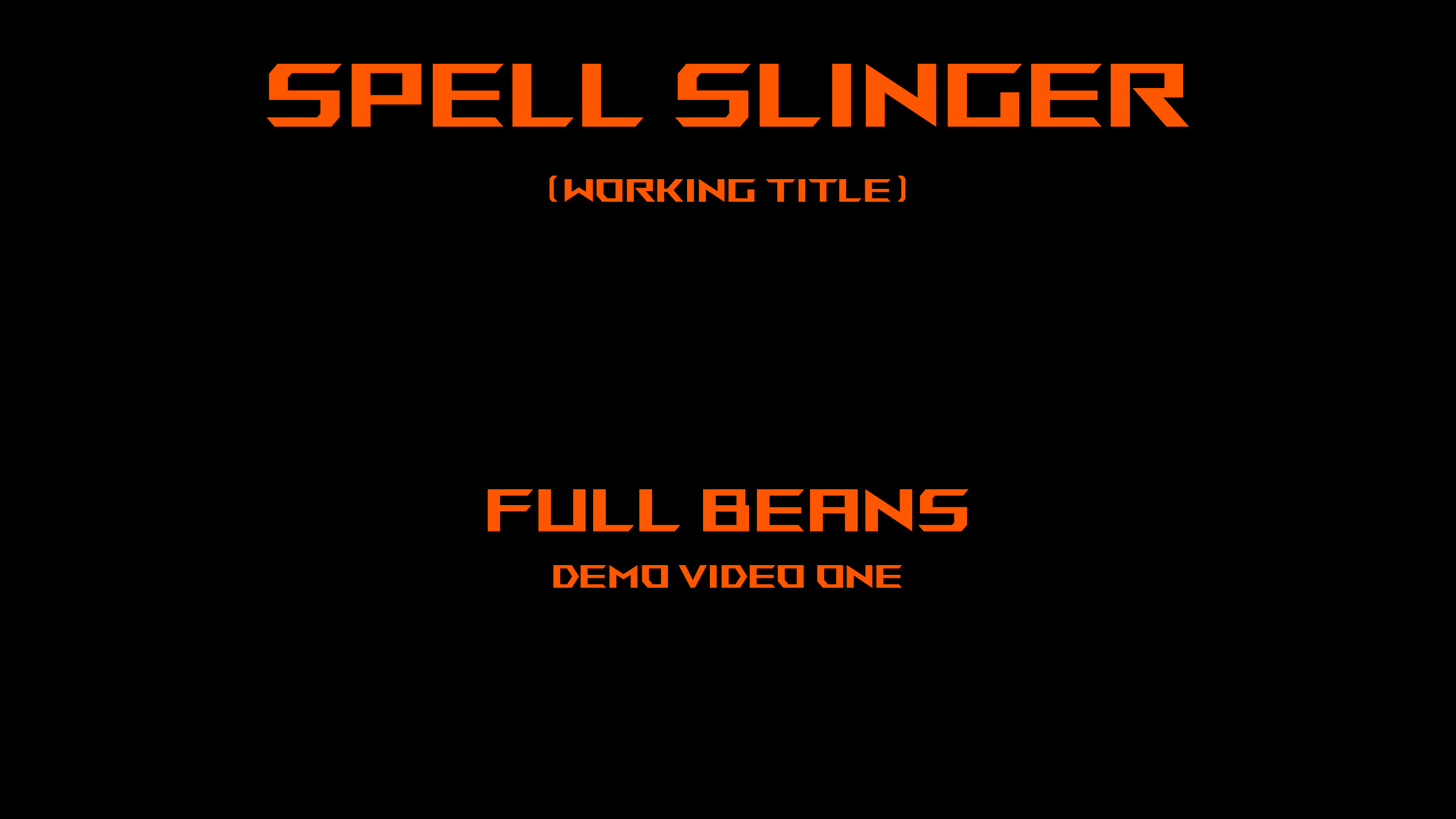
<style>
.page{position:relative;width:1456px;height:819px;background:#000000}
.page>*{position:absolute;margin:0}
.t1{font:144.5px "ROGFontsv1.6-Regular";color:#ff5700}
.t2{font:52px "ROGFontsv1.6-Regular";color:#ff5700}
.t3{font:96.3px "ROGFontsv1.6-Regular";color:#ff5700}
</style>
<div class="page">
<p class="t1" style="left:266px;top:64px;width:923px;height:63px">Spell Slinger</p>
<p class="t2" style="left:549px;top:175px;width:356px;height:27px">(Working Title)</p>
<p class="t3" style="left:488px;top:489px;width:481px;height:43px">Full beans</p>
<p class="t2" style="left:553px;top:565px;width:349px;height:23px">Demo Video One</p>
</div>
